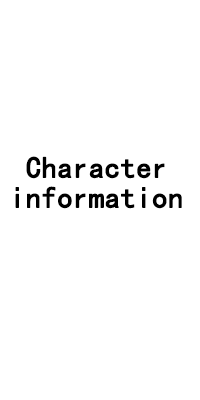
<style>
.page{position:relative;width:200px;height:400px;background:#ffffff}
.page>*{position:absolute;margin:0}
.t1{font:30px/10px "SimHei";color:#000000;font-weight:bold}
</style>
<div class="page">
<p class="t1" style="left:15px;top:156px;width:167px;height:53px;text-align:center">Character<br><br><br>information</p>
</div>
